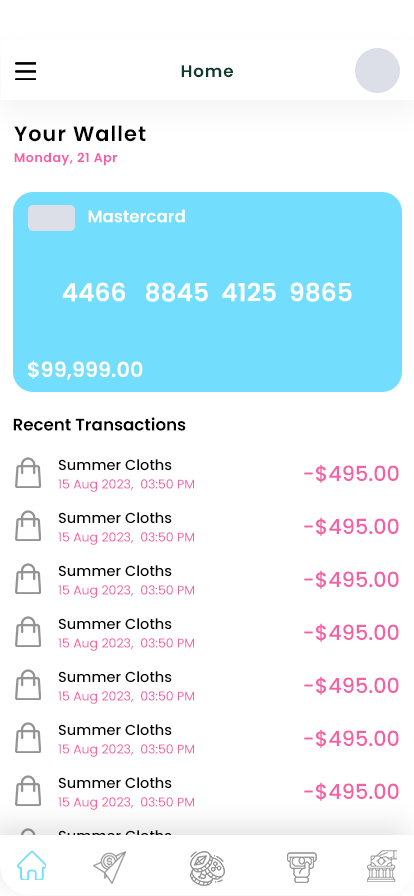
<style>
.page{position:relative;width:414px;height:896px;background:#ffffff}
.page>*{position:absolute;margin:0}
.t1{font:16.7px "Poppins-SemiBold";letter-spacing:0.05em;color:#0e3a2f}
.t2{font:20.8px "Poppins-SemiBold";letter-spacing:0.05em;color:#000000}
.t3{font:12.5px "Poppins-SemiBold";letter-spacing:0.05em;color:#f460a4}
.t4{font:16.7px "Poppins-SemiBold";color:#ffffff}
.t5{font:25px "Poppins-SemiBold";color:#ffffff}
.t6{font:20.8px "Poppins-SemiBold";color:#ffffff}
.t7{font:16.7px "Poppins-SemiBold";color:#010101}
.t8{font:14.6px "Poppins-Medium";color:#010101}
.t9{font:20.8px "Poppins-Medium";color:#f460a4}
.t10{font:12.5px "Poppins-Regular";color:#f460a4}
.t11{font:14.6px "Poppins-Medium"}
</style>
<div class="page">
<p class="t1" style="left:181px;top:65px;width:52px;height:13px">Home</p>
<p class="t2" style="left:14px;top:125px;width:132px;height:17px">Your Wallet</p>
<p class="t3" style="left:14px;top:152px;width:104px;height:14px">Monday, 21 Apr</p>
<p class="t4" style="left:88px;top:209px;width:97px;height:14px">Mastercard</p>
<p class="t5" style="left:62px;top:282px;width:290px;height:20px">4466   8845  4125  9865</p>
<p class="t6" style="left:28px;top:360px;width:115px;height:20px">$99,999.00</p>
<p class="t7" style="left:13px;top:417px;width:173px;height:14px">Recent Transactions</p>
<p class="t8" style="left:58px;top:459px;width:114px;height:12px">Summer Cloths</p>
<p class="t9" style="left:304px;top:464px;width:95px;height:19px">-$495.00</p>
<p class="t10" style="left:58px;top:479px;width:136px;height:13px">15 Aug 2023,  03:50 PM</p>
<p class="t8" style="left:58px;top:512px;width:114px;height:12px">Summer Cloths</p>
<p class="t9" style="left:304px;top:517px;width:95px;height:19px">-$495.00</p>
<p class="t10" style="left:58px;top:532px;width:136px;height:13px">15 Aug 2023,  03:50 PM</p>
<p class="t8" style="left:58px;top:565px;width:114px;height:12px">Summer Cloths</p>
<p class="t9" style="left:304px;top:570px;width:95px;height:19px">-$495.00</p>
<p class="t10" style="left:58px;top:585px;width:136px;height:13px">15 Aug 2023,  03:50 PM</p>
<p class="t8" style="left:58px;top:618px;width:114px;height:12px">Summer Cloths</p>
<p class="t9" style="left:304px;top:623px;width:95px;height:19px">-$495.00</p>
<p class="t10" style="left:58px;top:638px;width:136px;height:13px">15 Aug 2023,  03:50 PM</p>
<p class="t8" style="left:58px;top:671px;width:114px;height:12px">Summer Cloths</p>
<p class="t9" style="left:304px;top:676px;width:95px;height:19px">-$495.00</p>
<p class="t10" style="left:58px;top:691px;width:136px;height:13px">15 Aug 2023,  03:50 PM</p>
<p class="t8" style="left:58px;top:724px;width:114px;height:12px">Summer Cloths</p>
<p class="t9" style="left:304px;top:729px;width:95px;height:19px">-$495.00</p>
<p class="t10" style="left:58px;top:744px;width:136px;height:13px">15 Aug 2023,  03:50 PM</p>
<p class="t8" style="left:58px;top:777px;width:114px;height:12px">Summer Cloths</p>
<p class="t9" style="left:304px;top:782px;width:95px;height:19px">-$495.00</p>
<p class="t10" style="left:58px;top:797px;width:136px;height:13px">15 Aug 2023,  03:50 PM</p>
<p class="t11" style="left:58px;top:830px;width:114px;height:12px">Summer Cloths</p>
</div>
